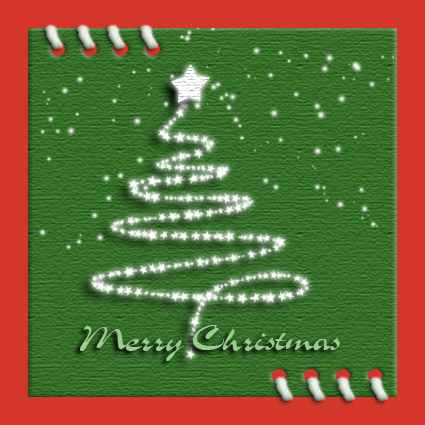
<style>
.page{position:relative;width:425px;height:425px;background:#d4372a}
.page>*{position:absolute;margin:0}
.t1{font:40.1px "VNI-Slogan";color:#98cc8d}
</style>
<div class="page">
<p class="t1" style="left:80px;top:325px;width:260px;height:36px">Merry Christmas</p>
</div>
